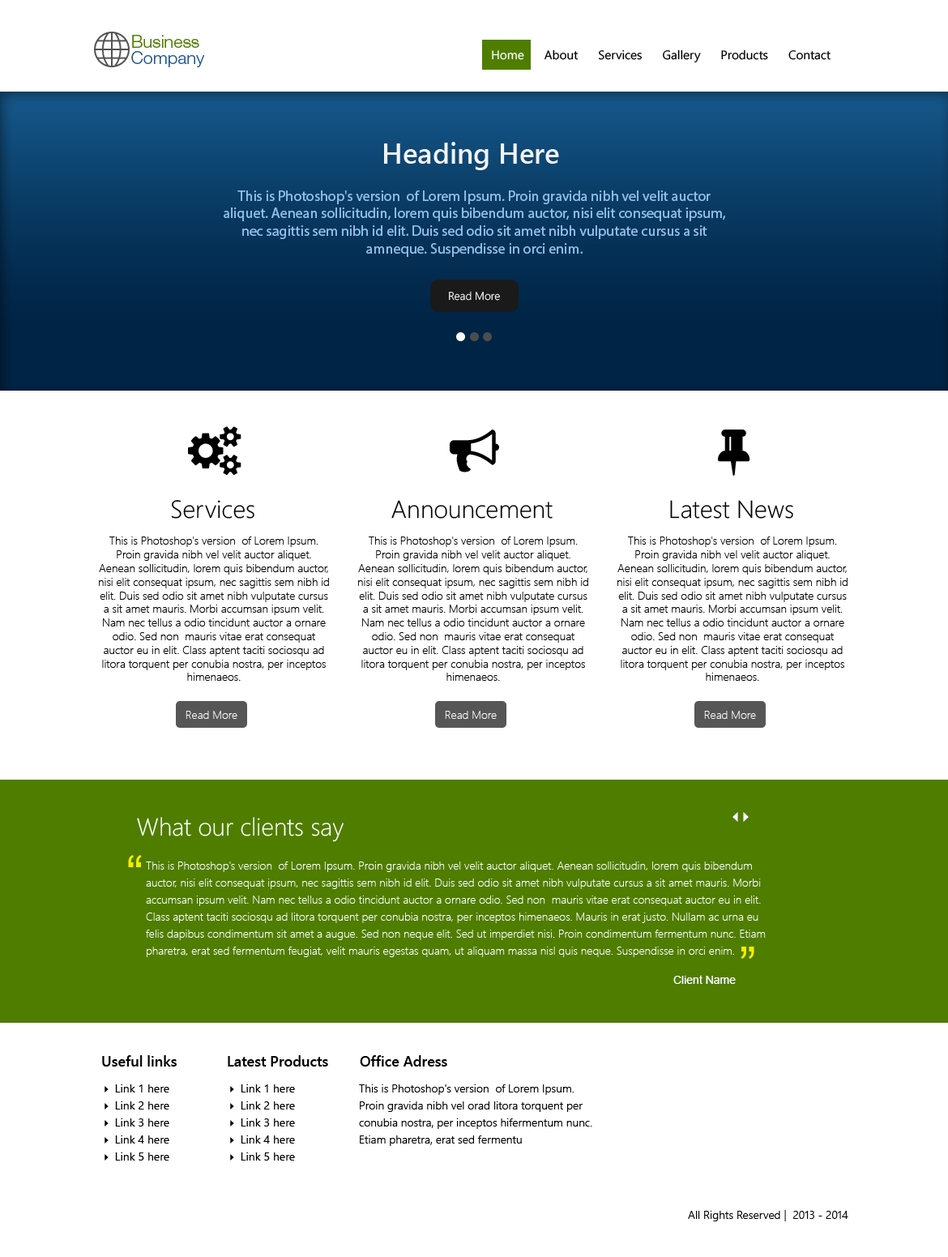
<style>
.page{position:relative;width:948px;height:1257px;background:#ffffff}
.page>*{position:absolute;margin:0}
.t1{font:17.4px "HelveticaNeue-Light";color:#4f7d00}
.t2{font:17.4px "HelveticaNeue-Light";color:#225990}
.t3{font:12.2px "SegoeUI";color:#010101}
.t4{font:12.2px "SegoeUI";color:#ffffff}
.t5{font:28.4px "SegoeUI-Semibold";color:#f3f3f3}
.t6{font:14.6px "MyriadPro-Regular";color:#8fc0eb}
.t7{font:11.3px "SegoeUI-Semilight";color:#ffffff}
.t8{font:24.8px "SegoeUI-Light";color:#000000}
.t9{font:11.3px "SegoeUI-Light";color:#000000}
.t10{font:11.3px "SegoeUI-Light";color:#ffffff}
.t11{font:24.8px "SegoeUI-Light";color:#ffffff}
.t12{font:51px "ArialMT";color:#f1ee00}
.t13{font:11.3px/17px "SegoeUI-Light";color:#ffffff}
.t14{font:50.7px "ArialMT";color:#f1ee00}
.t15{font:11.3px "ArialMT";color:#ffffff}
.t16{font:14.6px "SegoeUI-Semibold";color:#000000}
.t17{font:11.3px/17px "SegoeUI";color:#000000}
.t18{font:11.3px/17px "Webdings";color:#000000}
.t19{font:11.3px/17px "SegoeUI-Semilight";color:#000000}
.t20{font:11.3px "SegoeUI-Semilight";color:#000000}
</style>
<div class="page">
<p class="t1" style="left:132px;top:35px;width:67px;height:13px">Business</p>
<p class="t2" style="left:131px;top:51px;width:74px;height:16px">Company</p>
<p class="t3" style="left:492px;top:49px;width:339px;height:13px"><span class="t4">Home  </span>    About      Services      Gallery      Products      Contact</p>
<p class="t5" style="left:384px;top:142px;width:175px;height:28px">Heading Here</p>
<p class="t6" style="left:224px;top:190px;width:502px;height:67px;text-align:center">This is Photoshop's version  of Lorem Ipsum. Proin gravida nibh vel velit auctor aliquet. Aenean sollicitudin, lorem quis bibendum auctor, nisi elit consequat ipsum, nec sagittis sem nibh id elit. Duis sed odio sit amet nibh vulputate cursus a sit amneque. Suspendisse in orci enim.</p>
<p class="t7" style="left:449px;top:291px;width:51px;height:10px">Read More</p>
<p class="t8" style="left:171px;top:500px;width:84px;height:19px">Services</p>
<p class="t8" style="left:392px;top:500px;width:161px;height:19px">Announcement</p>
<p class="t8" style="left:670px;top:500px;width:124px;height:19px">Latest News</p>
<p class="t9" style="left:99px;top:537px;width:230px;height:144px;text-align:center">This is Photoshop's version  of Lorem Ipsum. Proin gravida nibh vel velit auctor aliquet. Aenean sollicitudin, lorem quis bibendum auctor, nisi elit consequat ipsum, nec sagittis sem nibh id elit. Duis sed odio sit amet nibh vulputate cursus a sit amet mauris. Morbi accumsan ipsum velit. Nam nec tellus a odio tincidunt auctor a ornare odio. Sed non  mauris vitae erat consequat auctor eu in elit. Class aptent taciti sociosqu ad litora torquent per conubia nostra, per inceptos himenaeos.</p>
<p class="t9" style="left:358px;top:537px;width:231px;height:144px;text-align:center">This is Photoshop's version  of Lorem Ipsum. Proin gravida nibh vel velit auctor aliquet. Aenean sollicitudin, lorem quis bibendum auctor, nisi elit consequat ipsum, nec sagittis sem nibh id elit. Duis sed odio sit amet nibh vulputate cursus a sit amet mauris. Morbi accumsan ipsum velit. Nam nec tellus a odio tincidunt auctor a ornare odio. Sed non  mauris vitae erat consequat auctor eu in elit. Class aptent taciti sociosqu ad litora torquent per conubia nostra, per inceptos himenaeos.</p>
<p class="t9" style="left:618px;top:537px;width:230px;height:144px;text-align:center">This is Photoshop's version  of Lorem Ipsum. Proin gravida nibh vel velit auctor aliquet. Aenean sollicitudin, lorem quis bibendum auctor, nisi elit consequat ipsum, nec sagittis sem nibh id elit. Duis sed odio sit amet nibh vulputate cursus a sit amet mauris. Morbi accumsan ipsum velit. Nam nec tellus a odio tincidunt auctor a ornare odio. Sed non  mauris vitae erat consequat auctor eu in elit. Class aptent taciti sociosqu ad litora torquent per conubia nostra, per inceptos himenaeos.</p>
<p class="t10" style="left:186px;top:711px;width:52px;height:8px">Read More</p>
<p class="t10" style="left:445px;top:711px;width:52px;height:8px">Read More</p>
<p class="t10" style="left:704px;top:711px;width:52px;height:8px">Read More</p>
<p class="t11" style="left:137px;top:817px;width:207px;height:25px">What our clients say</p>
<p class="t12" style="left:128px;top:855px;width:14px;height:12px">“</p>
<p class="t13" style="left:146px;top:862px;width:620px;height:95px">This is Photoshop's version  of Lorem Ipsum. Proin gravida nibh vel velit auctor aliquet. Aenean sollicitudin, lorem quis bibendum auctor, nisi elit consequat ipsum, nec sagittis sem nibh id elit. Duis sed odio sit amet nibh vulputate cursus a sit amet mauris. Morbi accumsan ipsum velit. Nam nec tellus a odio tincidunt auctor a ornare odio. Sed non  mauris vitae erat consequat auctor eu in elit. Class aptent taciti sociosqu ad litora torquent per conubia nostra, per inceptos himenaeos. Mauris in erat justo. Nullam ac urna eu felis dapibus condimentum sit amet a augue. Sed non neque elit. Sed ut imperdiet nisi. Proin condimentum fermentum nunc. Etiam pharetra, erat sed fermentum feugiat, velit mauris egestas quam, ut aliquam massa nisl quis neque. Suspendisse in orci enim.</p>
<p class="t14" style="left:741px;top:947px;width:14px;height:12px;rotate:180deg">“</p>
<p class="t15" style="left:674px;top:975px;width:62px;height:9px">Client Name</p>
<p class="t16" style="left:102px;top:1055px;width:75px;height:12px">Useful links</p>
<p class="t16" style="left:228px;top:1055px;width:100px;height:12px">Latest Products</p>
<p class="t16" style="left:360px;top:1055px;width:87px;height:12px">Office Adress</p>
<p class="t17" style="left:105px;top:1085px;width:64px;height:76px"><span class="t18">4</span> Link 1 here<br><span class="t18">4</span> Link 2 here<br><span class="t18">4</span> Link 3 here<br><span class="t18">4</span> Link 4 here<br><span class="t18">4</span> Link 5 here</p>
<p class="t17" style="left:230px;top:1085px;width:65px;height:76px"><span class="t18">4</span> Link 1 here<br><span class="t18">4</span> Link 2 here<br><span class="t18">4</span> Link 3 here<br><span class="t18">4</span> Link 4 here<br><span class="t18">4</span> Link 5 here</p>
<p class="t19" style="left:359px;top:1085px;width:234px;height:61px">This is Photoshop's version  of Lorem Ipsum. Proin gravida nibh vel orad litora torquent per conubia nostra, per inceptos hifermentum nunc. Etiam pharetra, erat sed fermentu</p>
<p class="t20" style="left:688px;top:1210px;width:161px;height:12px">All Rights Reserved |  2013 - 2014</p>
</div>
